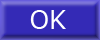
<style>
.page{position:relative;width:100px;height:40px;background:#342ab6}
.page>*{position:absolute;margin:0}
.t1{font:25px "MSReferenceSansSerif";color:#ffffff}
</style>
<div class="page">
<p class="t1" style="left:30px;top:10px;width:36px;height:19px">OK</p>
</div>
